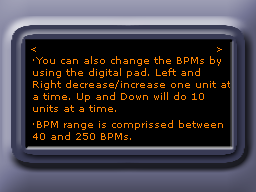
<style>
.page{position:relative;width:256px;height:192px;background:#000000}
.page>*{position:absolute;margin:0}
.t1{font:9px "MSReferenceSansSerif";color:#ff8400}
.t2{font:10px "MSReferenceSansSerif";color:#ff8400}
.t3{font:10px/16px "MSReferenceSansSerif";color:#ff8400}
</style>
<div class="page">
<p class="t1" style="left:31px;top:47px;width:5px;height:5px">&lt;</p>
<p class="t1" style="left:217px;top:47px;width:5px;height:5px">&gt;</p>
<p class="t2" style="left:33px;top:56px;width:198px;height:84px">·You can also change the BPMs by<br>using the digital pad. Left and <br>Right decrease/increase one unit at<br>a time. Up and Down will do 10 <br>units at a time.<br><span class="t3">·BPM range is comprissed between <br></span>40 and 250 BPMs.</p>
</div>
